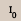
<style>
.page{position:relative;width:21px;height:21px;background:#d9cdc1}
.page>*{position:absolute;margin:0}
.t1{font:9px "Tahoma";color:#000000}
.t2{font:8px "Tahoma";color:#000000}
</style>
<div class="page">
<p class="t1" style="left:9px;top:6px;width:3px;height:7px">I</p>
<p class="t2" style="left:12px;top:12px;width:5px;height:7px">0</p>
</div>
